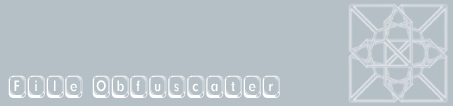
<style>
.page{position:relative;width:453px;height:106px;background:#b5bfc6}
.page>*{position:absolute;margin:0}
.t1{font:30px "BetsyFlanagan";color:#ffffff}
</style>
<div class="page">
<p class="t1" style="left:8px;top:75px;width:272px;height:23px">File Obfuscater</p>
</div>
